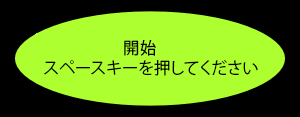
<style>
.page{position:relative;width:300px;height:117px;background:#adff2f}
.page>*{position:absolute;margin:0}
.t1{font:16.3px "KozGoPr6N-Regular";color:#000000}
</style>
<div class="page">
<p class="t1" style="left:44px;top:40px;width:214px;height:36px">开始<br>スペースキーを押してください</p>
</div>
